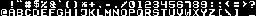
<style>
.page{position:relative;width:256px;height:16px;background:#000000}
.page>*{position:absolute;margin:0}
.t1{font:14px "SmallPixel-7";color:#ffffff}
.t2{font:13px "SmallPixel-7";color:#ffffff}
.t3{font:14px "SmallPixel-7"}
</style>
<div class="page">
<p class="t1" style="left:17px;top:0px;width:5px;height:2px">“</p>
<p class="t1" style="left:25px;top:1px;width:6px;height:7px">#</p>
<p class="t2" style="left:34px;top:0px;width:5px;height:8px">$</p>
<p class="t1" style="left:41px;top:1px;width:6px;height:7px">%</p>
<p class="t1" style="left:50px;top:1px;width:6px;height:7px">&amp;</p>
<p class="t3" style="left:59px;top:1px;width:2px;height:2px">‘</p>
<p class="t1" style="left:66px;top:1px;width:3px;height:7px">(</p>
<p class="t1" style="left:74px;top:1px;width:3px;height:7px">)</p>
<p class="t2" style="left:82px;top:2px;width:5px;height:5px">*</p>
<p class="t1" style="left:90px;top:2px;width:4px;height:5px">+</p>
<p class="t1" style="left:99px;top:6px;width:2px;height:2px">,</p>
<p class="t1" style="left:121px;top:1px;width:6px;height:7px">/</p>
<p class="t1" style="left:138px;top:1px;width:4px;height:7px">1</p>
<p class="t1" style="left:145px;top:1px;width:6px;height:7px">2</p>
<p class="t1" style="left:153px;top:1px;width:6px;height:7px">3</p>
<p class="t1" style="left:161px;top:1px;width:6px;height:7px">4</p>
<p class="t1" style="left:169px;top:1px;width:6px;height:7px">5</p>
<p class="t1" style="left:177px;top:1px;width:6px;height:7px">6</p>
<p class="t1" style="left:185px;top:1px;width:6px;height:7px">7</p>
<p class="t1" style="left:193px;top:1px;width:6px;height:7px">8</p>
<p class="t1" style="left:201px;top:1px;width:6px;height:7px">9</p>
<p class="t1" style="left:212px;top:2px;width:1px;height:5px">:</p>
<p class="t1" style="left:219px;top:1px;width:2px;height:7px">;</p>
<p class="t1" style="left:225px;top:1px;width:4px;height:6px">&lt;</p>
<p class="t1" style="left:243px;top:1px;width:4px;height:6px">&gt;</p>
<p class="t1" style="left:249px;top:1px;width:6px;height:7px">?</p>
<p class="t1" style="left:1px;top:9px;width:6px;height:7px">@</p>
<p class="t1" style="left:9px;top:9px;width:6px;height:7px">A</p>
<p class="t1" style="left:17px;top:9px;width:6px;height:7px">B</p>
<p class="t1" style="left:25px;top:9px;width:6px;height:7px">C</p>
<p class="t1" style="left:33px;top:9px;width:6px;height:7px">D</p>
<p class="t1" style="left:41px;top:9px;width:6px;height:7px">E</p>
<p class="t1" style="left:49px;top:9px;width:6px;height:7px">F</p>
<p class="t1" style="left:57px;top:9px;width:6px;height:7px">G</p>
<p class="t1" style="left:65px;top:9px;width:6px;height:7px">H</p>
<p class="t1" style="left:81px;top:9px;width:6px;height:7px">J</p>
<p class="t1" style="left:89px;top:9px;width:6px;height:7px">K</p>
<p class="t1" style="left:121px;top:9px;width:6px;height:7px">O</p>
<p class="t1" style="left:129px;top:9px;width:6px;height:7px">P</p>
<p class="t1" style="left:137px;top:9px;width:6px;height:7px">Q</p>
<p class="t1" style="left:153px;top:9px;width:6px;height:7px">S</p>
<p class="t1" style="left:161px;top:9px;width:6px;height:7px">T</p>
<p class="t1" style="left:169px;top:9px;width:6px;height:7px">U</p>
<p class="t1" style="left:177px;top:9px;width:6px;height:7px">V</p>
<p class="t1" style="left:201px;top:9px;width:6px;height:7px">Y</p>
<p class="t1" style="left:209px;top:9px;width:6px;height:7px">Z</p>
<p class="t1" style="left:219px;top:9px;width:3px;height:7px">[</p>
<p class="t1" style="left:225px;top:9px;width:6px;height:7px">\</p>
<p class="t1" style="left:235px;top:9px;width:3px;height:7px">]</p>
</div>
